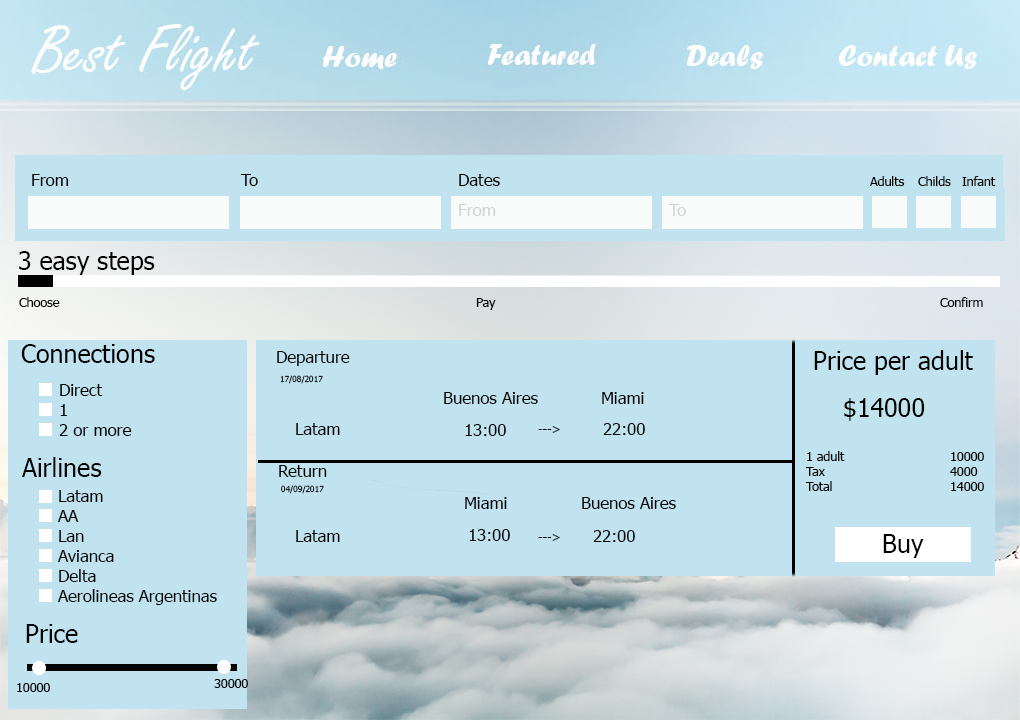
<style>
.page{position:relative;width:1020px;height:720px;background:#c1e3ef}
.page>*{position:absolute;margin:0}
.t1{font:16.7px "Tahoma";color:#000000}
.t2{font:12.5px "Tahoma";color:#000000}
.t3{font:12.5px "Tahoma";color:#030303}
.t4{font:16.7px "Tahoma";color:#d4d4d4}
.t5{font:25px "Tahoma";color:#030303}
.t6{font:25px "Tahoma";color:#000000}
.t7{font:16.7px "Tahoma";color:#050505}
.t8{font:8.3px "Tahoma";color:#050505}
.t9{font:12.5px "Tahoma";color:#050505}
.t10{font:25px "Tahoma";color:#050505}
</style>
<div class="page">
<p class="t1" style="left:32px;top:174px;width:37px;height:12px">From</p>
<p class="t1" style="left:240px;top:174px;width:18px;height:12px">To</p>
<p class="t1" style="left:459px;top:174px;width:41px;height:12px">Dates</p>
<p class="t2" style="left:870px;top:176px;width:35px;height:10px">Adults</p>
<p class="t2" style="left:918px;top:176px;width:33px;height:10px">Childs</p>
<p class="t3" style="left:962px;top:176px;width:34px;height:10px">Infant</p>
<p class="t4" style="left:459px;top:204px;width:37px;height:12px">From</p>
<p class="t4" style="left:668px;top:204px;width:18px;height:12px">To</p>
<p class="t5" style="left:19px;top:251px;width:136px;height:24px">3 easy steps</p>
<p class="t3" style="left:19px;top:297px;width:41px;height:10px">Choose</p>
<p class="t3" style="left:476px;top:298px;width:20px;height:12px">Pay</p>
<p class="t3" style="left:940px;top:297px;width:43px;height:10px">Confirm</p>
<p class="t6" style="left:21px;top:344px;width:134px;height:19px">Connections</p>
<p class="t7" style="left:277px;top:351px;width:73px;height:15px">Departure</p>
<p class="t5" style="left:814px;top:350px;width:159px;height:25px">Price per adult</p>
<p class="t8" style="left:280px;top:375px;width:43px;height:9px">17/08/2017</p>
<p class="t1" style="left:59px;top:384px;width:73px;height:52px">Direct<br>1<br>2 or more</p>
<p class="t7" style="left:444px;top:392px;width:94px;height:12px">Buenos Aires</p>
<p class="t7" style="left:602px;top:392px;width:42px;height:12px">Miami</p>
<p class="t5" style="left:844px;top:398px;width:81px;height:23px">$14000</p>
<p class="t7" style="left:296px;top:423px;width:44px;height:12px">Latam</p>
<p class="t7" style="left:465px;top:424px;width:41px;height:12px">13:00</p>
<p class="t7" style="left:603px;top:423px;width:42px;height:12px">22:00</p>
<p class="t9" style="left:538px;top:426px;width:22px;height:7px">---&gt;</p>
<p class="t10" style="left:22px;top:457px;width:80px;height:20px">Airlines</p>
<p class="t3" style="left:805px;top:451px;width:179px;height:40px">1 adult   10000<br>Tax    4000<br>Total    14000</p>
<p class="t7" style="left:279px;top:465px;width:48px;height:12px">Return</p>
<p class="t8" style="left:281px;top:485px;width:43px;height:9px">04/09/2017</p>
<p class="t7" style="left:58px;top:490px;width:159px;height:115px">Latam<br>AA<br>Lan<br>Avianca<br>Delta<br>Aerolineas Argentinas</p>
<p class="t7" style="left:465px;top:497px;width:42px;height:12px">Miami</p>
<p class="t7" style="left:582px;top:497px;width:94px;height:12px">Buenos Aires</p>
<p class="t7" style="left:296px;top:530px;width:44px;height:12px">Latam</p>
<p class="t7" style="left:469px;top:529px;width:41px;height:12px">13:00</p>
<p class="t9" style="left:538px;top:534px;width:22px;height:7px">---&gt;</p>
<p class="t7" style="left:593px;top:530px;width:42px;height:12px">22:00</p>
<p class="t5" style="left:883px;top:534px;width:41px;height:24px">Buy</p>
<p class="t10" style="left:26px;top:624px;width:52px;height:19px">Price</p>
<p class="t9" style="left:17px;top:683px;width:33px;height:9px">10000</p>
<p class="t9" style="left:214px;top:679px;width:34px;height:9px">30000</p>
</div>
